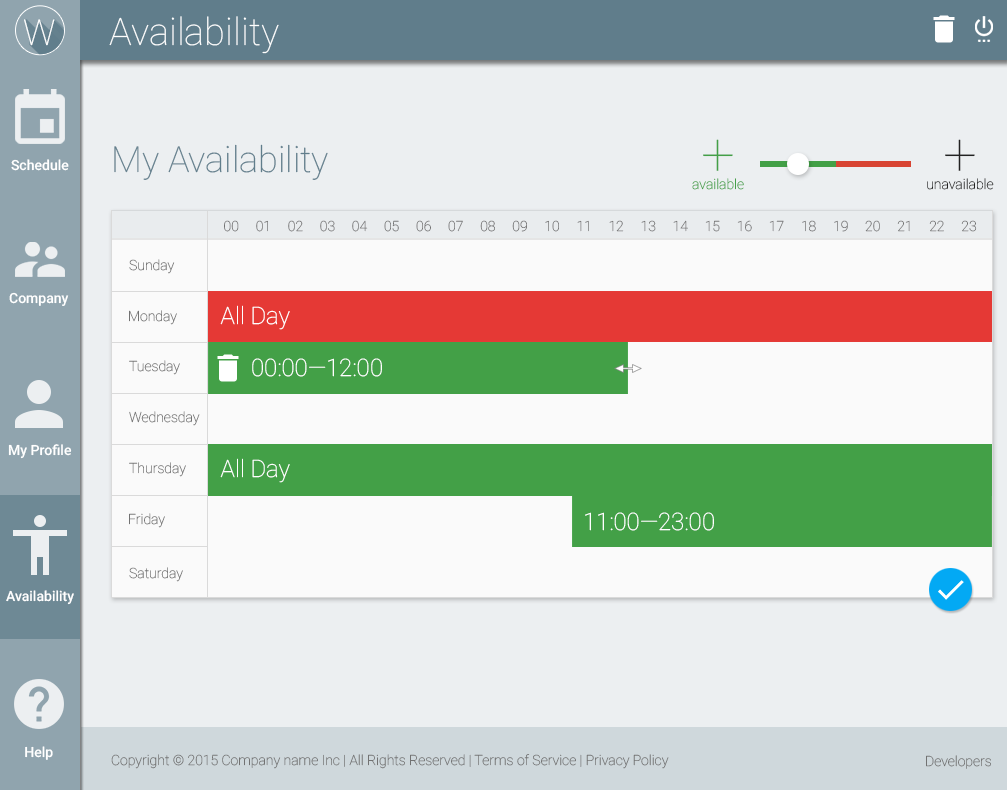
<style>
.page{position:relative;width:1007px;height:790px;background:#eceff1}
.page>*{position:absolute;margin:0}
.t1{font:38px "Roboto-Thin";color:#ffffff}
.t2{font:35.7px "Roboto-Thin";color:#ffffff}
.t3{font:36px "Roboto-Thin";color:#607d8b}
.t4{font:14px/14px "Roboto-Thin";color:#43a047}
.t5{font:60px "Roboto-Thin";color:#43a047}
.t6{font:14px/14px "Roboto-Thin";color:#222222}
.t7{font:60px "Roboto-Thin";color:#222222}
.t8{font:14px "Roboto-Medium";color:#ffffff}
.t9{font:14px "Roboto-Thin";color:#727272}
.t10{font:24px "Roboto-Thin";color:#ffffff}
</style>
<div class="page">
<p class="t1" style="left:109px;top:16px;width:170px;height:38px">Availability</p>
<p class="t2" style="left:24px;top:19px;width:31px;height:27px">W</p>
<p class="t3" style="left:114px;top:144px;width:214px;height:36px">My Availability</p>
<p class="t4" style="left:692px;top:139px;width:52px;height:51px;text-align:center"><span class="t5">+<br></span>available</p>
<p class="t6" style="left:927px;top:139px;width:67px;height:51px;text-align:center"><span class="t7">+<br></span>unavailable</p>
<p class="t8" style="left:11px;top:159px;width:58px;height:12px">Schedule</p>
<p class="t9" style="left:224px;top:220px;width:753px;height:12px">00     01     02     03     04     05     06     07     08     09     10     11     12     13     14     15     16     17     18     19     20     21     22     23</p>
<p class="t9" style="left:129px;top:259px;width:46px;height:15px">Sunday</p>
<p class="t8" style="left:9px;top:292px;width:60px;height:14px">Company</p>
<p class="t10" style="left:220px;top:305px;width:70px;height:25px">All Day</p>
<p class="t9" style="left:129px;top:310px;width:48px;height:15px">Monday</p>
<p class="t9" style="left:129px;top:360px;width:51px;height:15px">Tuesday</p>
<p class="t10" style="left:252px;top:358px;width:130px;height:19px">00:00—12:00</p>
<p class="t9" style="left:129px;top:411px;width:71px;height:15px">Wednesday</p>
<p class="t8" style="left:8px;top:444px;width:64px;height:15px">My Profile</p>
<p class="t9" style="left:129px;top:462px;width:57px;height:15px">Thursday</p>
<p class="t10" style="left:220px;top:458px;width:70px;height:25px">All Day</p>
<p class="t9" style="left:129px;top:513px;width:36px;height:15px">Friday</p>
<p class="t10" style="left:585px;top:512px;width:129px;height:19px">11:00—23:00</p>
<p class="t9" style="left:129px;top:567px;width:54px;height:15px">Saturday</p>
<p class="t8" style="left:6px;top:590px;width:68px;height:15px">Availability</p>
<p class="t8" style="left:25px;top:746px;width:28px;height:14px">Help</p>
<p class="t9" style="left:111px;top:754px;width:558px;height:15px">Copyright © 2015 Company name Inc | All Rights Reserved | Terms of Service | Privacy Policy</p>
<p class="t9" style="left:926px;top:755px;width:65px;height:14px">Developers</p>
</div>
